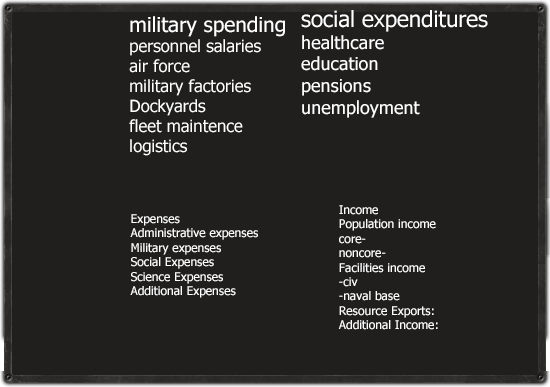
<style>
.page{position:relative;width:550px;height:387px;background:#201f1e}
.page>*{position:absolute;margin:0}
.t1{font:16.7px "Tahoma";color:#ffffff}
.t2{font:20.8px "Tahoma";color:#ffffff}
.t3{font:18.1px "Tahoma";color:#ffffff}
.t4{font:22.2px "Tahoma";color:#ffffff}
.t5{font:12px "Tahoma";color:#ffffff}
</style>
<div class="page">
<p class="t1" style="left:129px;top:16px;width:156px;height:140px"><span class="t2">military spending<br></span>personnel salaries<br>air force<br>military factories<br>Dockyards<br>fleet maintence<br>logistics</p>
<p class="t3" style="left:301px;top:10px;width:187px;height:108px"><span class="t4">social expenditures<br></span>healthcare<br>education<br>pensions<br>unemployment</p>
<p class="t5" style="left:338px;top:205px;width:100px;height:125px">Income<br>Population income<br>core-<br>noncore-<br>Facilities income<br>-civ<br>-naval base<br>Resource Exports:<br>Additional Income:</p>
<p class="t5" style="left:130px;top:214px;width:128px;height:84px">Expenses<br>Administrative expenses<br>Military expenses<br>Social Expenses<br>Science Expenses<br>Additional Expenses</p>
</div>
